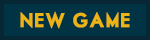
<style>
.page{position:relative;width:150px;height:40px;background:#003344}
.page>*{position:absolute;margin:0}
.t1{font:19px "Motor-Oil-1937-M54-Regular";letter-spacing:0.05em;color:#ecb314;text-transform:uppercase;font-weight:bold}
</style>
<div class="page">
<p class="t1" style="left:20px;top:11px;width:110px;height:18px">NEW GAME</p>
</div>
